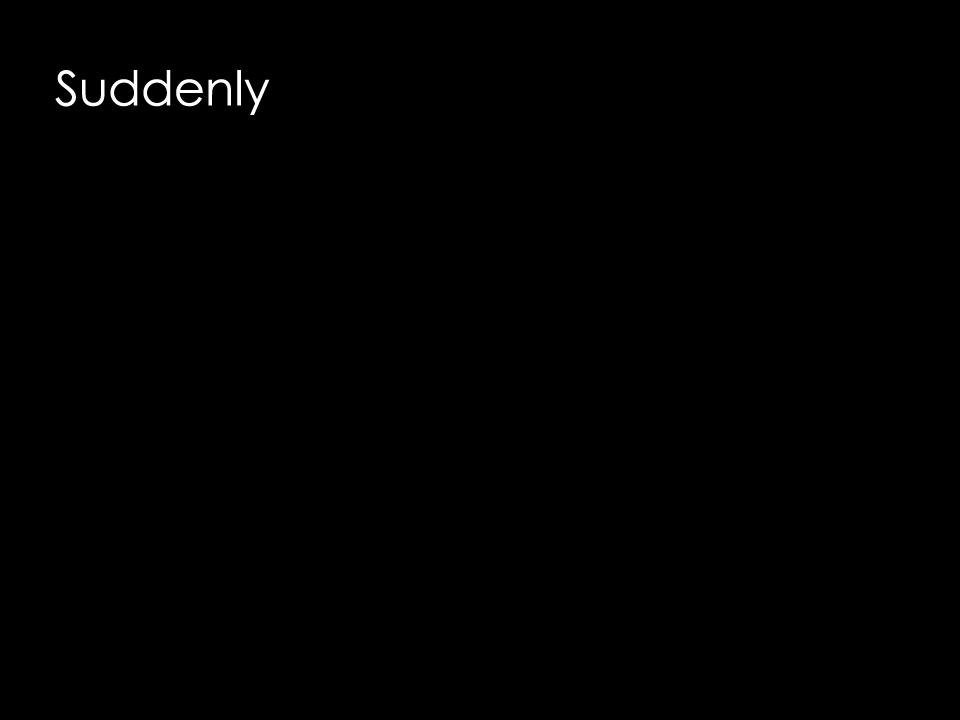
<style>
.page{position:relative;width:960px;height:720px;background:#000000}
.page>*{position:absolute;margin:0}
.t1{font:48px "CenturyGothic";color:#ffffff}
</style>
<div class="page">
<p class="t1" style="left:55px;top:70px;width:215px;height:45px">Suddenly</p>
</div>
